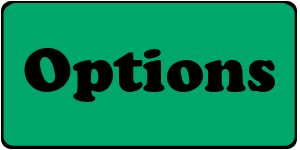
<style>
.page{position:relative;width:300px;height:150px;background:#00a76c}
.page>*{position:absolute;margin:0}
.t1{font:60px "CooperBlackStd";color:#000000}
</style>
<div class="page">
<p class="t1" style="left:24px;top:48px;width:251px;height:54px">Options</p>
</div>
